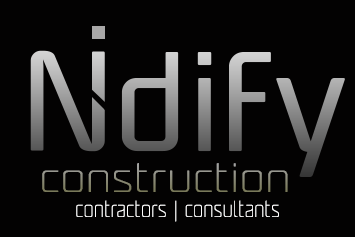
<style>
.page{position:relative;width:355px;height:237px;background:#030202}
.page>*{position:absolute;margin:0}
.t1{font:38.5px "UnicodSans-UltraLight";scale:1.32 1}
.t2{font:21.8px "UnicodSans-UltraLight";color:#ffffff;scale:0.94 1}
</style>
<div class="page">
<p class="t1" style="left:42px;top:163px;width:246px;height:29px">construction</p>
<p class="t2" style="left:76px;top:200px;width:203px;height:22px">contractors | consultants</p>
</div>
